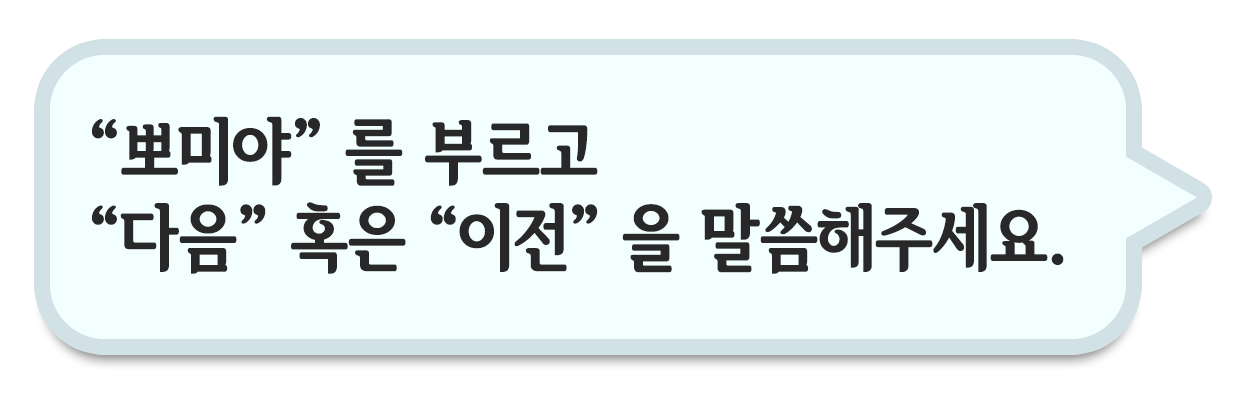
<style>
.page{position:relative;width:1251px;height:401px;background:#f3feff}
.page>*{position:absolute;margin:0}
.t1{font:72px "SeoulHangangCBL";color:#282828}
</style>
<div class="page">
<p class="t1" style="left:92px;top:116px;width:972px;height:158px">“뽀미야” 를 부르고 <br>“다음” 혹은 “이전” 을 말씀해주세요.</p>
</div>
